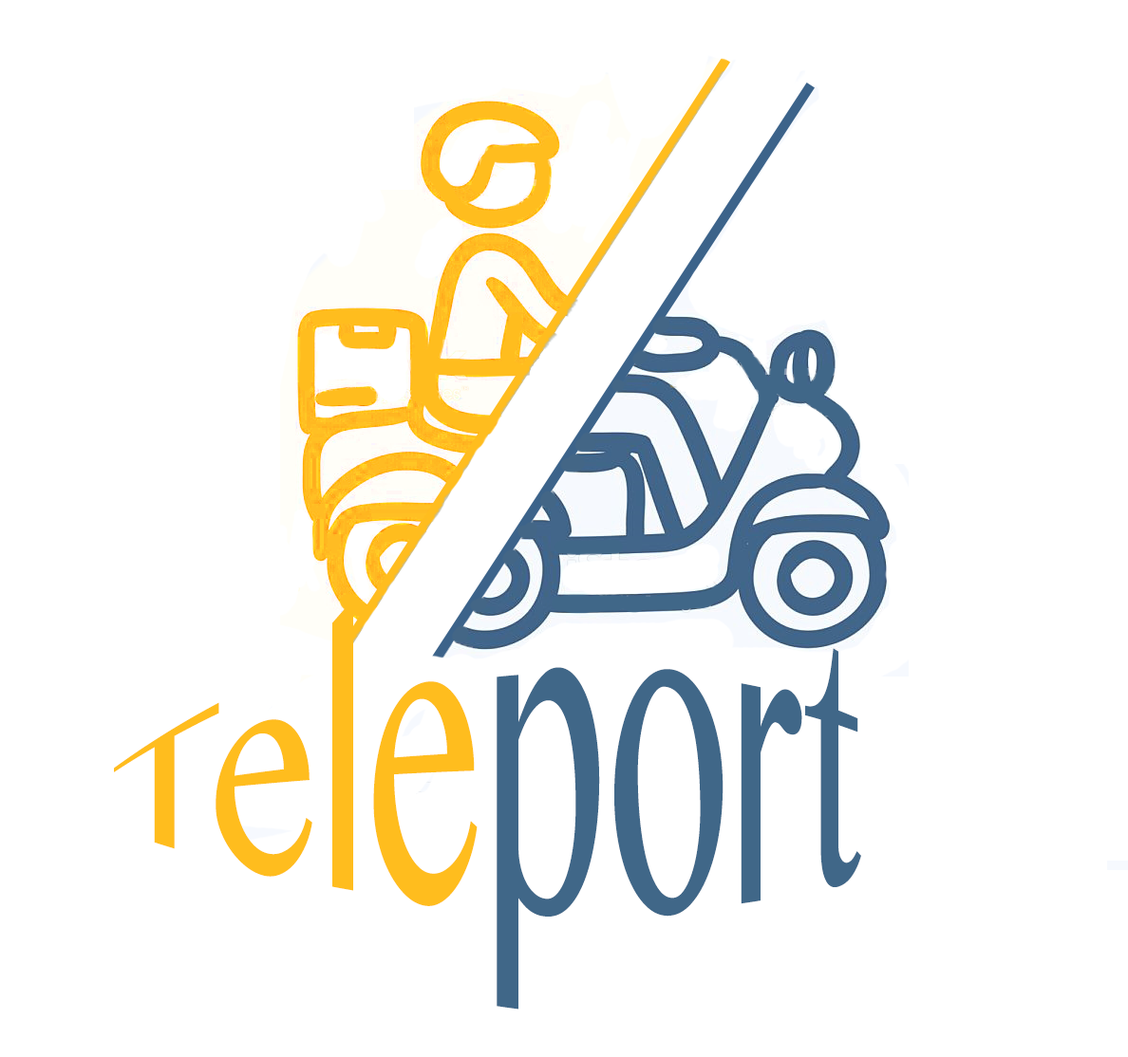
<style>
.page{position:relative;width:1128px;height:1057px;background:#ffffff}
.page>*{position:absolute;margin:0}
.t1{font:189.8px "MalayalamMN";color:#ffbd1e}
.t2{font:189.8px "MalayalamMN";color:#406788}
</style>
<div class="page">
<p class="t1" style="left:114px;top:604px;width:747px;height:406px;text-align:center">Tele<span class="t2">port</span></p>
</div>
